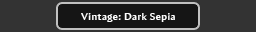
<style>
.page{position:relative;width:256px;height:32px;background:#333333}
.page>*{position:absolute;margin:0}
.t1{font:10px "AmiraParadiso";letter-spacing:0.05em;color:#ffffff}
</style>
<div class="page">
<p class="t1" style="left:81px;top:13px;width:94px;height:9px">Vintage: Dark Sepia</p>
</div>
